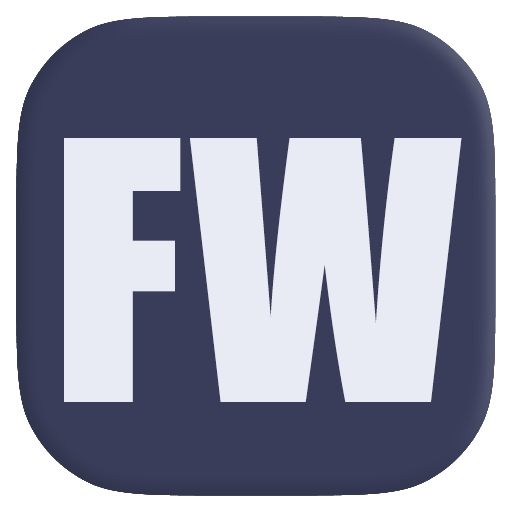
<style>
.page{position:relative;width:512px;height:512px;background:#393d5a}
.page>*{position:absolute;margin:0}
.t1{font:333.4px "Impact";color:#e9ebf4}
</style>
<div class="page">
<p class="t1" style="left:64px;top:138px;width:398px;height:264px">FW</p>
</div>
